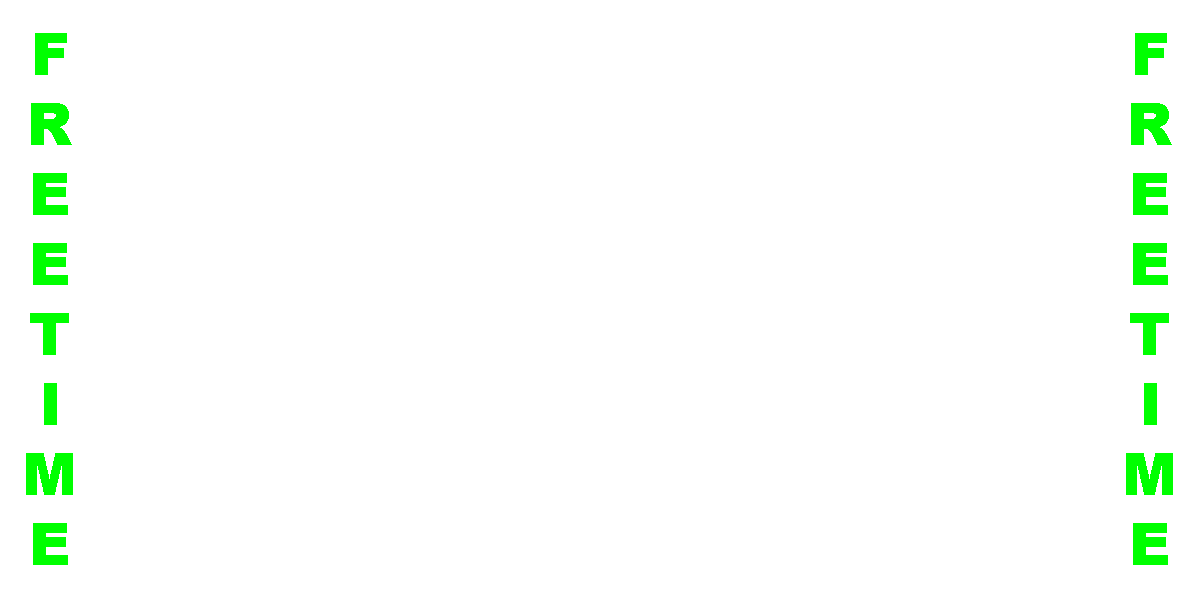
<style>
.page{position:relative;width:1200px;height:600px;background:#ffffff}
.page>*{position:absolute;margin:0}
.t1{font:58.3px "Arial-Black";color:#00ff00}
</style>
<div class="page">
<p class="t1" style="left:26px;top:33px;width:47px;height:532px;text-align:center">F<br>R<br>E<br>E<br>T<br>I<br>M<br>E</p>
<p class="t1" style="left:1126px;top:33px;width:47px;height:532px;text-align:center">F<br>R<br>E<br>E<br>T<br>I<br>M<br>E</p>
</div>
